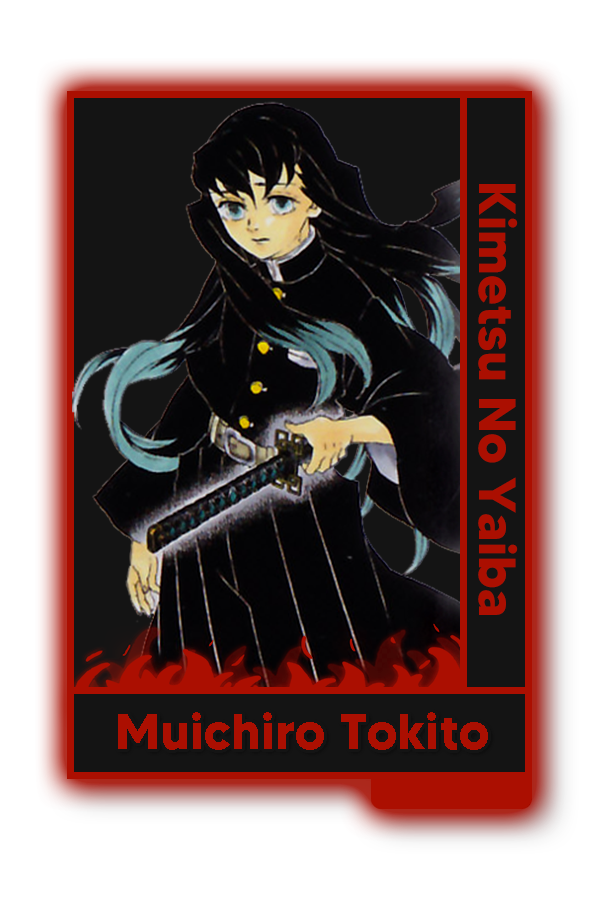
<style>
.page{position:relative;width:600px;height:900px;background:#ffffff}
.page>*{position:absolute;margin:0}
.t1{font:52px "MADETOMMY-Bold";color:#ab0f01}
.t2{font:50.5px "MADETOMMY-Bold";color:#ab0f01}
</style>
<div class="page">
<p class="t1" style="left:478px;top:184px;width:40px;height:431px;rotate:90deg">Kimetsu No Yaiba</p>
<p class="t2" style="left:118px;top:712px;width:370px;height:38px">Muichiro Tokito</p>
</div>
